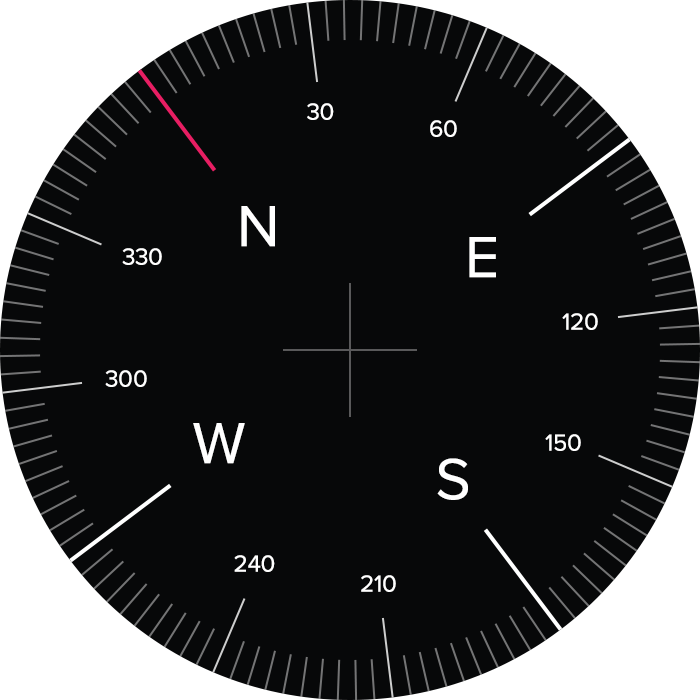
<style>
.page{position:relative;width:700px;height:700px;background:#070809}
.page>*{position:absolute;margin:0}
.t1{font:24px "ProximaNova-Regular";color:#ffffff}
.t2{font:60px "ProximaNova-Regular";color:#ffffff}
</style>
<div class="page">
<p class="t1" style="left:307px;top:103px;width:27px;height:17px">30</p>
<p class="t1" style="left:430px;top:120px;width:27px;height:17px">60</p>
<p class="t2" style="left:241px;top:206px;width:34px;height:41px">N</p>
<p class="t2" style="left:469px;top:237px;width:27px;height:41px">E</p>
<p class="t1" style="left:122px;top:248px;width:40px;height:17px">330</p>
<p class="t1" style="left:562px;top:313px;width:36px;height:17px">120</p>
<p class="t1" style="left:105px;top:370px;width:42px;height:17px">300</p>
<p class="t2" style="left:193px;top:423px;width:52px;height:41px">W</p>
<p class="t1" style="left:545px;top:434px;width:36px;height:17px">150</p>
<p class="t2" style="left:437px;top:458px;width:31px;height:42px">S</p>
<p class="t1" style="left:234px;top:555px;width:41px;height:17px">240</p>
<p class="t1" style="left:361px;top:575px;width:35px;height:17px">210</p>
</div>
